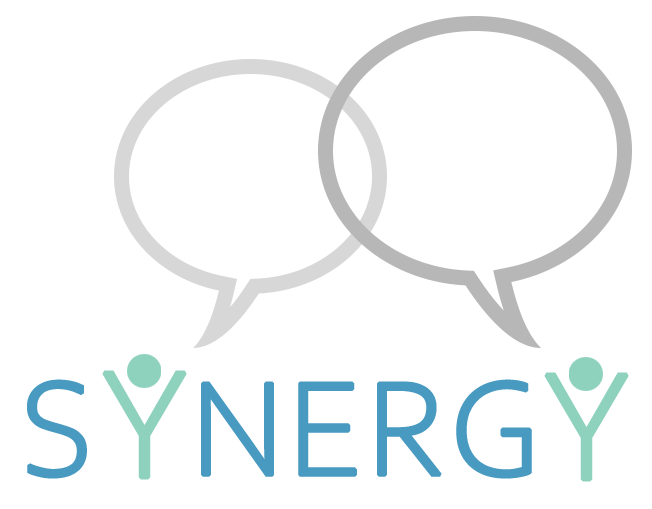
<style>
.page{position:relative;width:652px;height:509px;background:#ffffff}
.page>*{position:absolute;margin:0}
.t1{font:160px "CorbelLight";color:#8ed2bd;font-weight:bold}
.t2{font:140px "CorbelLight";color:#489ac1;font-weight:bold}
</style>
<div class="page">
<p class="t1" style="left:102px;top:370px;width:85px;height:110px">Y</p>
<p class="t1" style="left:544px;top:372px;width:85px;height:110px">Y</p>
<p class="t2" style="left:27px;top:379px;width:505px;height:100px">S   NERG</p>
</div>
